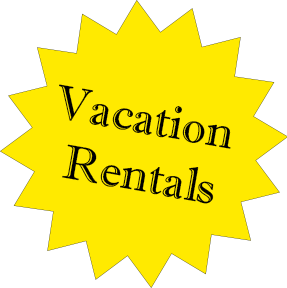
<style>
.page{position:relative;width:287px;height:288px;background:#ffea00}
.page>*{position:absolute;margin:0}
.t1{font:48px "ImprintMT-Shadow";color:#000000}
</style>
<div class="page">
<p class="t1" style="left:59px;top:84px;width:172px;height:120px;rotate:10deg">Vacation Rentals</p>
</div>
